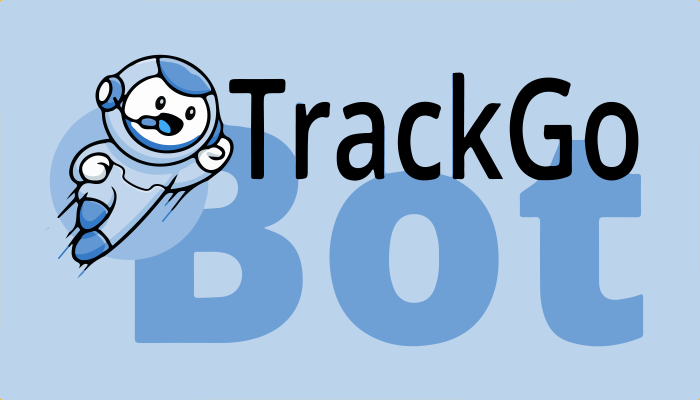
<style>
.page{position:relative;width:700px;height:400px;background:#bcd3ec}
.page>*{position:absolute;margin:0}
.t1{font:140px "OpenSans-Semibold";color:#000000;scale:0.75 1}
.t2{font:305.8px "OpenSans-Extrabold";color:#6ea0d6}
</style>
<div class="page">
<p class="t1" style="left:229px;top:72px;width:410px;height:109px">TrackGo</p>
<p class="t2" style="left:134px;top:124px;width:510px;height:222px">Bot</p>
</div>
